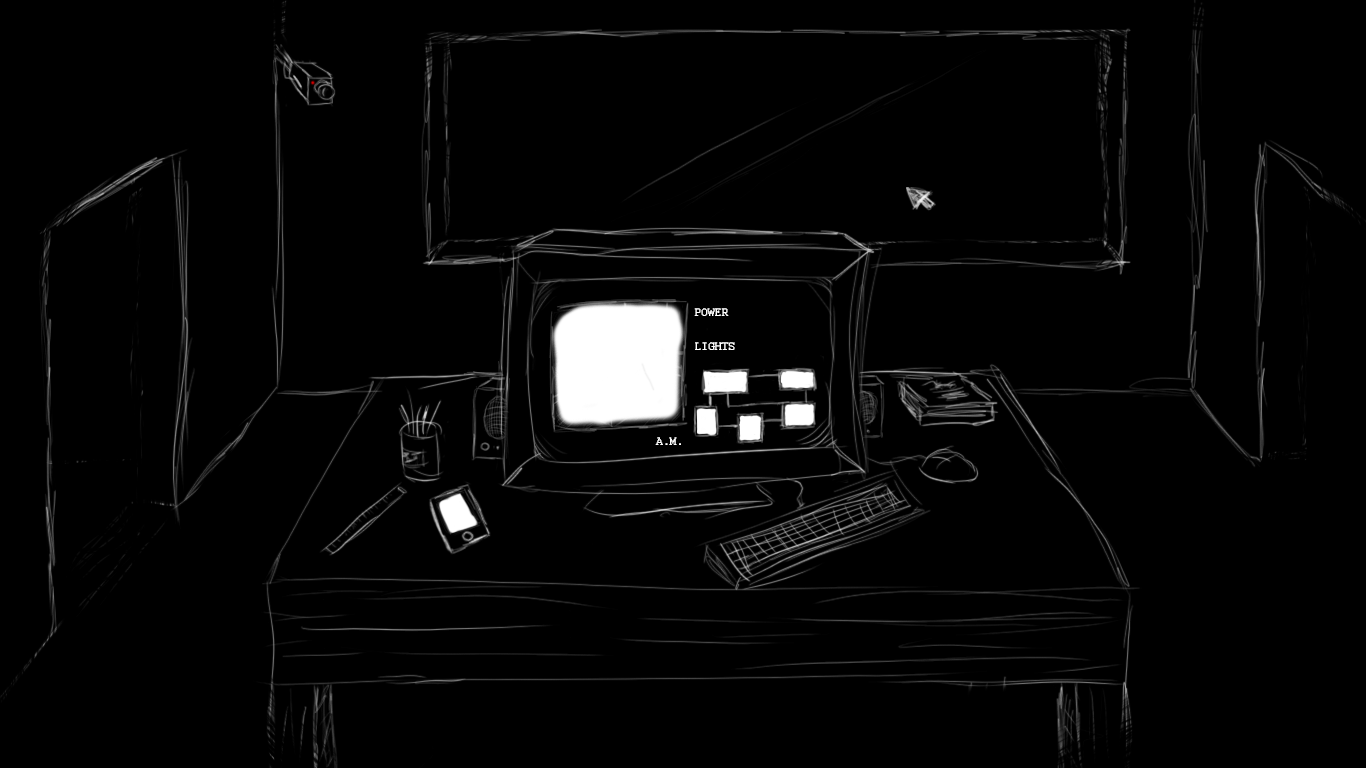
<style>
.page{position:relative;width:1366px;height:768px;background:#000000}
.page>*{position:absolute;margin:0}
.t1{font:12px "Courier";color:#ffffff}
</style>
<div class="page">
<p class="t1" style="left:694px;top:308px;width:35px;height:8px">POWER</p>
<p class="t1" style="left:695px;top:342px;width:40px;height:8px">LIGHTS</p>
<p class="t1" style="left:655px;top:437px;width:26px;height:8px">A.M.</p>
</div>
